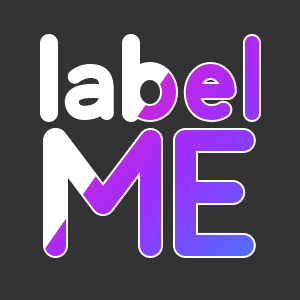
<style>
.page{position:relative;width:300px;height:300px;background:#333333}
.page>*{position:absolute;margin:0}
.t1{font:120px "Odin-Bold"}
.t2{font:180px/136px "Odin-Bold"}
</style>
<div class="page">
<p class="t1" style="left:42px;top:36px;width:217px;height:220px;text-align:center">label<br><span class="t2">ME</span></p>
<p class="t1" style="left:42px;top:36px;width:217px;height:220px;text-align:center">label<br><span class="t2">ME</span></p>
</div>
